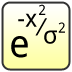
<style>
.page{position:relative;width:72px;height:72px}
.page>*{position:absolute;margin:0}
.t1{font:13.9px "DroidSans";color:#000000}
.t2{font:24.3px "DroidSans";color:#000000}
.t3{font:38.2px "DroidSans";color:#000000}
</style>
<div class="page">
<p class="t1" style="left:39px;top:4px;width:7px;height:11px">2</p>
<p class="t2" style="left:18px;top:13px;width:19px;height:14px">-x</p>
<p class="t2" style="left:35px;top:18px;width:12px;height:18px">⁄</p>
<p class="t2" style="left:44px;top:30px;width:13px;height:14px">σ</p>
<p class="t1" style="left:58px;top:22px;width:7px;height:11px">2</p>
<p class="t3" style="left:11px;top:36px;width:17px;height:22px">e</p>
</div>
